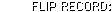
<style>
.page{position:relative;width:112px;height:12px;background:#ffffff}
.page>*{position:absolute;margin:0}
.t1{font:12px "Geneva";color:#000000}
</style>
<div class="page">
<p class="t1" style="left:33px;top:2px;width:78px;height:9px">FLIP RECORD:</p>
</div>
